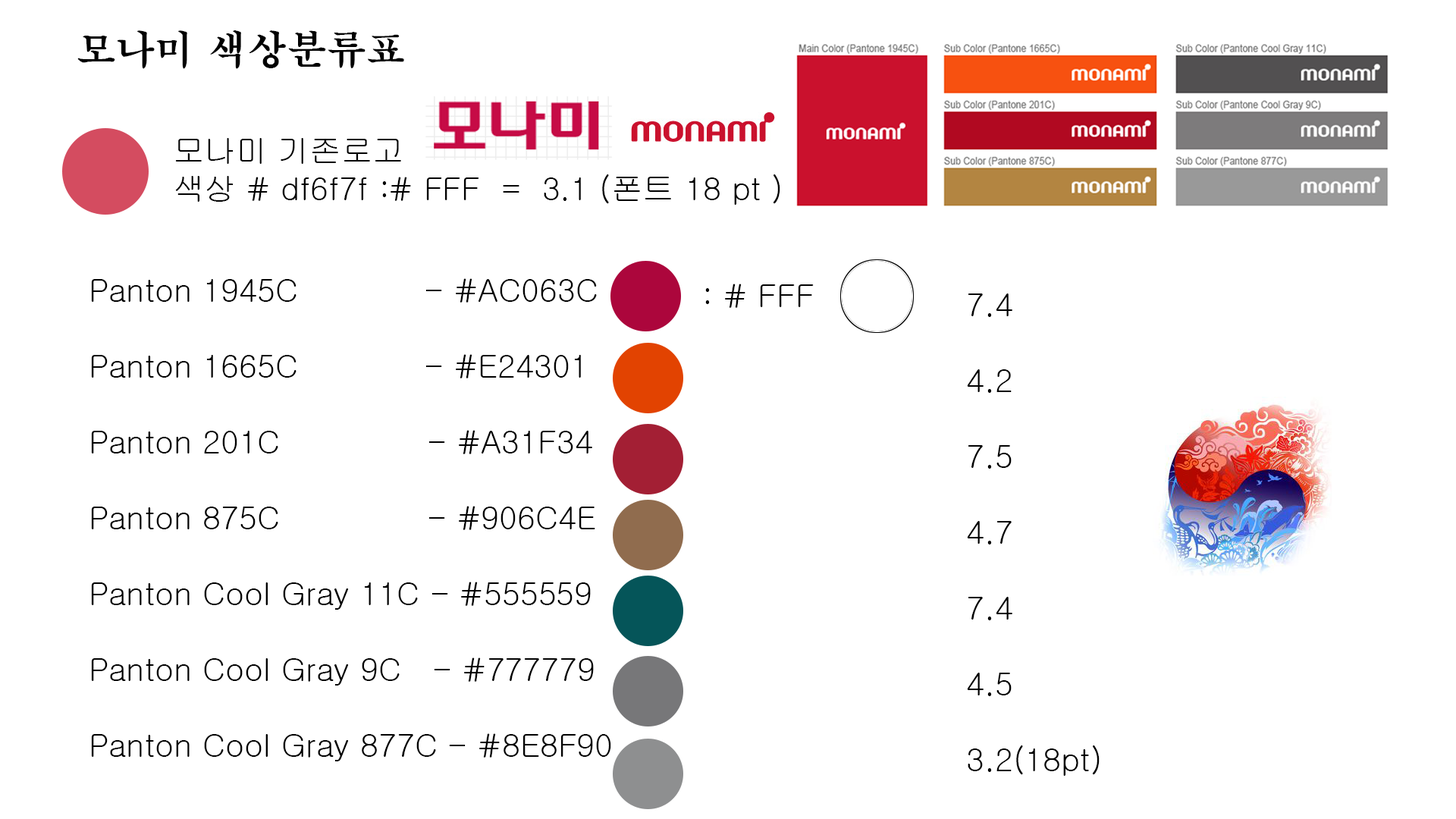
<style>
.page{position:relative;width:1456px;height:819px;background:#ffffff}
.page>*{position:absolute;margin:0}
.t1{font:39.5px "H2mjrE";color:#000000}
.t2{font:31.6px "Gulim";color:#000000}
</style>
<div class="page">
<p class="t1" style="left:77px;top:30px;width:327px;height:39px">모나미 색상분류표</p>
<p class="t2" style="left:175px;top:138px;width:605px;height:67px">모나미 기존로고<br>색상 # df6f7f :# FFF  =  3.1 (폰트 18 pt )</p>
<p class="t2" style="left:91px;top:278px;width:520px;height:483px">Panton 1945C            - #AC063C<br><br>Panton 1665C            - #E24301<br><br>Panton 201C              - #A31F34<br><br>Panton 875C              - #906C4E<br><br>Panton Cool Gray 11C - #555559<br><br>Panton Cool Gray 9C   - #777779<br><br>Panton Cool Gray 877C - #8E8F90</p>
<p class="t2" style="left:705px;top:284px;width:109px;height:24px">: # FFF</p>
<p class="t2" style="left:967px;top:293px;width:133px;height:483px">7.4<br><br>4.2<br><br>7.5<br><br>4.7<br><br>7.4<br><br>4.5<br><br>3.2(18pt)</p>
</div>
